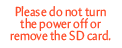
<style>
.page{position:relative;width:122px;height:48px;background:#ffffff}
.page>*{position:absolute;margin:0}
.t1{font:13.2px/12px "Amira-Roman";color:#fe4d2a;scale:0.91 1}
</style>
<div class="page">
<p class="t1" style="left:10px;top:6px;width:101px;height:35px;text-align:center">Please do not turn <br>the power off or <br>remove the SD card.</p>
</div>
